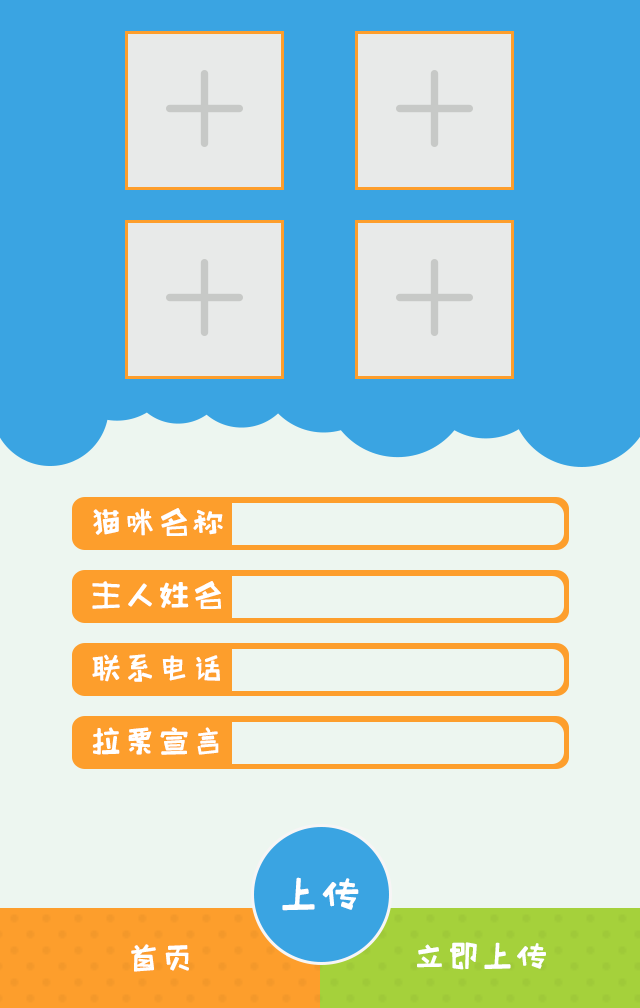
<style>
.page{position:relative;width:640px;height:1008px;background:#edf6f0}
.page>*{position:absolute;margin:0}
.t1{font:34px "HappyZcool";color:#ffffff}
.t2{font:42px "HappyZcool";color:#ffffff}
</style>
<div class="page">
<p class="t1" style="left:93px;top:508px;width:130px;height:28px">猫咪名称</p>
<p class="t1" style="left:92px;top:581px;width:129px;height:28px">主人姓名</p>
<p class="t1" style="left:92px;top:654px;width:128px;height:28px">联系电话</p>
<p class="t1" style="left:92px;top:727px;width:127px;height:28px">拉票宣言</p>
<p class="t2" style="left:282px;top:877px;width:77px;height:34px">上传</p>
<p class="t1" style="left:417px;top:942px;width:129px;height:28px">立即上传</p>
<p class="t1" style="left:131px;top:944px;width:58px;height:28px">首页</p>
</div>
